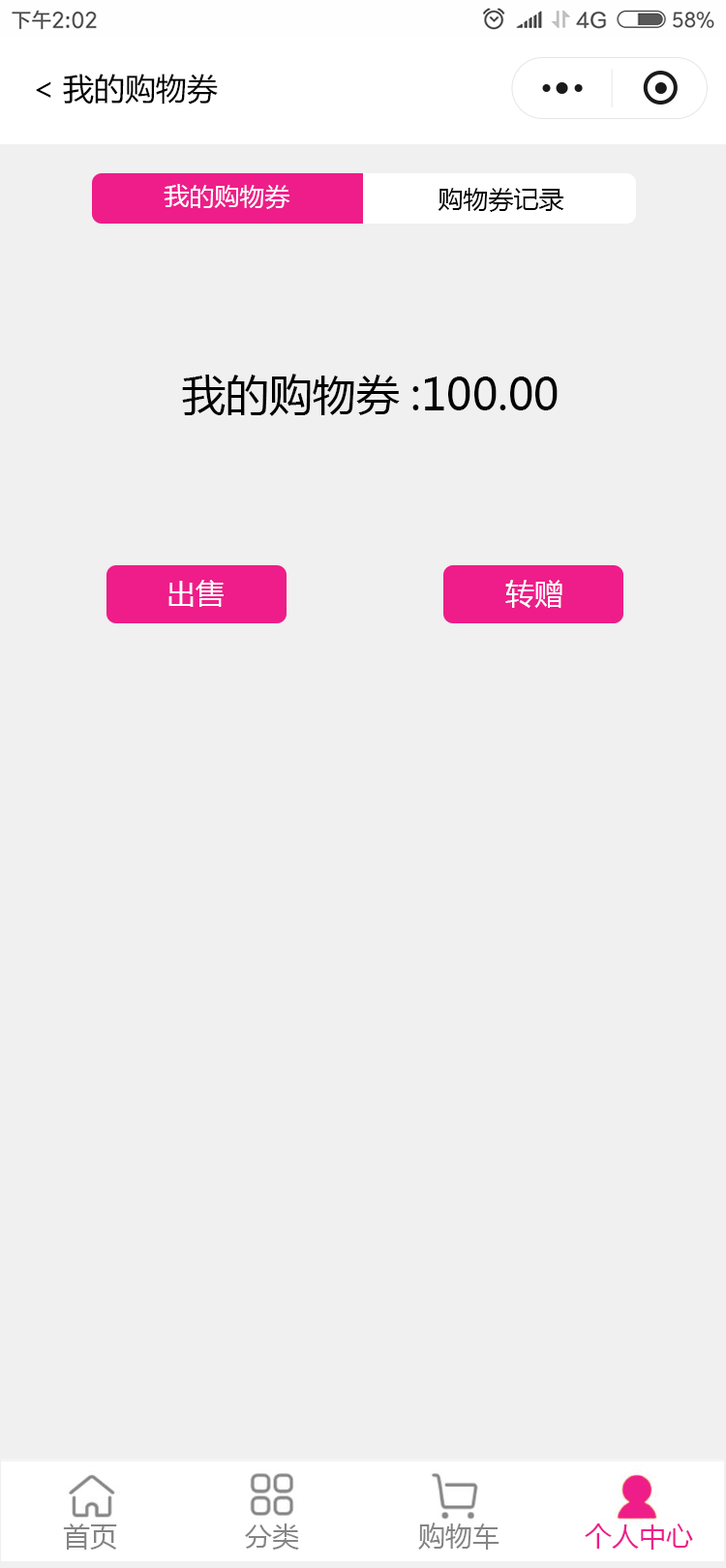
<style>
.page{position:relative;width:726px;height:1568px;background:#f0f0f0}
.page>*{position:absolute;margin:0}
.t1{font:31px "MicrosoftYaHei";color:#000000}
.t2{font:25.2px "MicrosoftYaHei";color:#ffffff}
.t3{font:25.2px "MicrosoftYaHei";color:#000000}
.t4{font:43.6px "MicrosoftYaHei";color:#000000}
.t5{font:29px "MicrosoftYaHei";color:#ffffff}
</style>
<div class="page">
<p class="t1" style="left:36px;top:74px;width:182px;height:31px">&lt;我的购物券</p>
<p class="t2" style="left:164px;top:184px;width:126px;height:25px">我的购物券</p>
<p class="t3" style="left:437px;top:188px;width:127px;height:24px">购物券记录</p>
<p class="t4" style="left:182px;top:374px;width:376px;height:42px">我的购物券:100.00</p>
<p class="t5" style="left:168px;top:580px;width:56px;height:27px">出售</p>
<p class="t5" style="left:505px;top:580px;width:57px;height:28px">转赠</p>
</div>
